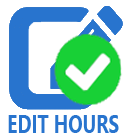
<style>
.page{position:relative;width:128px;height:135px;background:#ffffff}
.page>*{position:absolute;margin:0}
.t1{font:26.4px "SegoeUI-Bold";color:#2874ce;scale:0.72 1}
</style>
<div class="page">
<p class="t1" style="left:8px;top:115px;width:111px;height:18px">EDIT HOURS</p>
</div>
